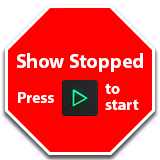
<style>
.page{position:relative;width:160px;height:160px;background:#ff0000}
.page>*{position:absolute;margin:0}
.t1{font:20px "MyriadPro-Bold";color:#ffffff}
.t2{font:16px/16px "MyriadPro-Bold";color:#ffffff}
.t3{font:16px "MyriadPro-Bold";color:#ffffff}
</style>
<div class="page">
<p class="t1" style="left:16px;top:53px;width:127px;height:19px">Show Stopped</p>
<p class="t2" style="left:105px;top:83px;width:34px;height:27px">to<br>start</p>
<p class="t3" style="left:18px;top:92px;width:36px;height:11px">Press</p>
</div>
